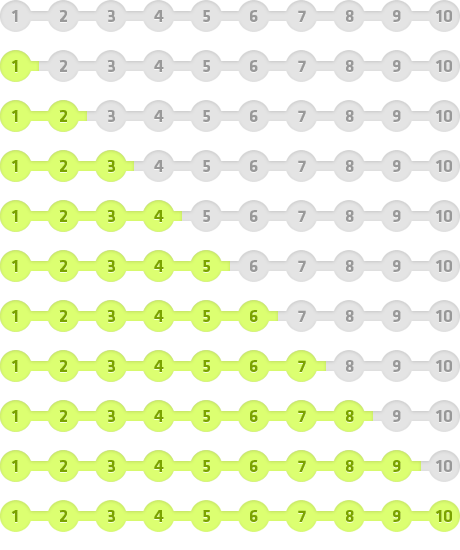
<style>
.page{position:relative;width:460px;height:550px;background:#ffffff}
.page>*{position:absolute;margin:0}
.t1{font:18px "KlavikaBold-Bold";color:#999999}
.t2{font:18px "KlavikaBold-Bold";color:#7aa200}
.t3{font:18px "KlavikaBold-Bold";color:#7ba300}
</style>
<div class="page">
<p class="t1" style="left:11px;top:10px;width:7px;height:12px">1</p>
<p class="t1" style="left:59px;top:10px;width:8px;height:12px">2</p>
<p class="t1" style="left:107px;top:10px;width:8px;height:12px">3</p>
<p class="t1" style="left:154px;top:10px;width:10px;height:12px">4</p>
<p class="t1" style="left:203px;top:10px;width:7px;height:12px">5</p>
<p class="t1" style="left:250px;top:10px;width:8px;height:12px">6</p>
<p class="t1" style="left:298px;top:10px;width:8px;height:12px">7</p>
<p class="t1" style="left:346px;top:10px;width:8px;height:12px">8</p>
<p class="t1" style="left:393px;top:10px;width:8px;height:12px">9</p>
<p class="t1" style="left:435px;top:10px;width:17px;height:12px">10</p>
<p class="t2" style="left:11px;top:60px;width:7px;height:12px">1</p>
<p class="t1" style="left:59px;top:60px;width:8px;height:12px">2</p>
<p class="t1" style="left:107px;top:60px;width:8px;height:12px">3</p>
<p class="t1" style="left:154px;top:60px;width:10px;height:12px">4</p>
<p class="t1" style="left:203px;top:60px;width:7px;height:12px">5</p>
<p class="t1" style="left:250px;top:60px;width:8px;height:12px">6</p>
<p class="t1" style="left:298px;top:60px;width:8px;height:12px">7</p>
<p class="t1" style="left:346px;top:60px;width:8px;height:12px">8</p>
<p class="t1" style="left:393px;top:60px;width:8px;height:12px">9</p>
<p class="t1" style="left:435px;top:60px;width:17px;height:12px">10</p>
<p class="t2" style="left:11px;top:110px;width:7px;height:12px">1</p>
<p class="t3" style="left:59px;top:110px;width:8px;height:12px">2</p>
<p class="t1" style="left:107px;top:110px;width:8px;height:12px">3</p>
<p class="t1" style="left:154px;top:110px;width:10px;height:12px">4</p>
<p class="t1" style="left:203px;top:110px;width:7px;height:12px">5</p>
<p class="t1" style="left:250px;top:110px;width:8px;height:12px">6</p>
<p class="t1" style="left:298px;top:110px;width:8px;height:12px">7</p>
<p class="t1" style="left:346px;top:110px;width:8px;height:12px">8</p>
<p class="t1" style="left:393px;top:110px;width:8px;height:12px">9</p>
<p class="t1" style="left:435px;top:110px;width:17px;height:12px">10</p>
<p class="t2" style="left:11px;top:160px;width:7px;height:12px">1</p>
<p class="t3" style="left:59px;top:160px;width:8px;height:12px">2</p>
<p class="t3" style="left:107px;top:160px;width:8px;height:12px">3</p>
<p class="t1" style="left:154px;top:160px;width:10px;height:12px">4</p>
<p class="t1" style="left:203px;top:160px;width:7px;height:12px">5</p>
<p class="t1" style="left:250px;top:160px;width:8px;height:12px">6</p>
<p class="t1" style="left:298px;top:160px;width:8px;height:12px">7</p>
<p class="t1" style="left:346px;top:160px;width:8px;height:12px">8</p>
<p class="t1" style="left:393px;top:160px;width:8px;height:12px">9</p>
<p class="t1" style="left:435px;top:160px;width:17px;height:12px">10</p>
<p class="t2" style="left:11px;top:210px;width:7px;height:12px">1</p>
<p class="t3" style="left:59px;top:210px;width:8px;height:12px">2</p>
<p class="t3" style="left:107px;top:210px;width:8px;height:12px">3</p>
<p class="t3" style="left:154px;top:210px;width:10px;height:12px">4</p>
<p class="t1" style="left:203px;top:210px;width:7px;height:12px">5</p>
<p class="t1" style="left:250px;top:210px;width:8px;height:12px">6</p>
<p class="t1" style="left:298px;top:210px;width:8px;height:12px">7</p>
<p class="t1" style="left:346px;top:210px;width:8px;height:12px">8</p>
<p class="t1" style="left:393px;top:210px;width:8px;height:12px">9</p>
<p class="t1" style="left:435px;top:210px;width:17px;height:12px">10</p>
<p class="t2" style="left:11px;top:260px;width:7px;height:12px">1</p>
<p class="t3" style="left:59px;top:260px;width:8px;height:12px">2</p>
<p class="t3" style="left:107px;top:260px;width:8px;height:12px">3</p>
<p class="t3" style="left:154px;top:260px;width:10px;height:12px">4</p>
<p class="t3" style="left:203px;top:260px;width:7px;height:12px">5</p>
<p class="t1" style="left:250px;top:260px;width:8px;height:12px">6</p>
<p class="t1" style="left:298px;top:260px;width:8px;height:12px">7</p>
<p class="t1" style="left:346px;top:260px;width:8px;height:12px">8</p>
<p class="t1" style="left:393px;top:260px;width:8px;height:12px">9</p>
<p class="t1" style="left:435px;top:260px;width:17px;height:12px">10</p>
<p class="t2" style="left:11px;top:310px;width:7px;height:12px">1</p>
<p class="t3" style="left:59px;top:310px;width:8px;height:12px">2</p>
<p class="t3" style="left:107px;top:310px;width:8px;height:12px">3</p>
<p class="t3" style="left:154px;top:310px;width:10px;height:12px">4</p>
<p class="t3" style="left:203px;top:310px;width:7px;height:12px">5</p>
<p class="t3" style="left:250px;top:310px;width:8px;height:12px">6</p>
<p class="t1" style="left:298px;top:310px;width:8px;height:12px">7</p>
<p class="t1" style="left:346px;top:310px;width:8px;height:12px">8</p>
<p class="t1" style="left:393px;top:310px;width:8px;height:12px">9</p>
<p class="t1" style="left:435px;top:310px;width:17px;height:12px">10</p>
<p class="t2" style="left:11px;top:360px;width:7px;height:12px">1</p>
<p class="t3" style="left:59px;top:360px;width:8px;height:12px">2</p>
<p class="t3" style="left:107px;top:360px;width:8px;height:12px">3</p>
<p class="t3" style="left:154px;top:360px;width:10px;height:12px">4</p>
<p class="t3" style="left:203px;top:360px;width:7px;height:12px">5</p>
<p class="t3" style="left:250px;top:360px;width:8px;height:12px">6</p>
<p class="t3" style="left:298px;top:360px;width:8px;height:12px">7</p>
<p class="t1" style="left:346px;top:360px;width:8px;height:12px">8</p>
<p class="t1" style="left:393px;top:360px;width:8px;height:12px">9</p>
<p class="t1" style="left:435px;top:360px;width:17px;height:12px">10</p>
<p class="t2" style="left:11px;top:410px;width:7px;height:12px">1</p>
<p class="t3" style="left:59px;top:410px;width:8px;height:12px">2</p>
<p class="t3" style="left:107px;top:410px;width:8px;height:12px">3</p>
<p class="t3" style="left:154px;top:410px;width:10px;height:12px">4</p>
<p class="t3" style="left:203px;top:410px;width:7px;height:12px">5</p>
<p class="t3" style="left:250px;top:410px;width:8px;height:12px">6</p>
<p class="t3" style="left:298px;top:410px;width:8px;height:12px">7</p>
<p class="t3" style="left:346px;top:410px;width:8px;height:12px">8</p>
<p class="t1" style="left:393px;top:410px;width:8px;height:12px">9</p>
<p class="t1" style="left:435px;top:410px;width:17px;height:12px">10</p>
<p class="t2" style="left:11px;top:460px;width:7px;height:12px">1</p>
<p class="t3" style="left:59px;top:460px;width:8px;height:12px">2</p>
<p class="t3" style="left:107px;top:460px;width:8px;height:12px">3</p>
<p class="t3" style="left:154px;top:460px;width:10px;height:12px">4</p>
<p class="t3" style="left:203px;top:460px;width:7px;height:12px">5</p>
<p class="t3" style="left:250px;top:460px;width:8px;height:12px">6</p>
<p class="t3" style="left:298px;top:460px;width:8px;height:12px">7</p>
<p class="t3" style="left:346px;top:460px;width:8px;height:12px">8</p>
<p class="t3" style="left:393px;top:460px;width:8px;height:12px">9</p>
<p class="t1" style="left:435px;top:460px;width:17px;height:12px">10</p>
<p class="t2" style="left:11px;top:510px;width:7px;height:12px">1</p>
<p class="t3" style="left:59px;top:510px;width:8px;height:12px">2</p>
<p class="t3" style="left:107px;top:510px;width:8px;height:12px">3</p>
<p class="t3" style="left:154px;top:510px;width:10px;height:12px">4</p>
<p class="t3" style="left:203px;top:510px;width:7px;height:12px">5</p>
<p class="t3" style="left:250px;top:510px;width:8px;height:12px">6</p>
<p class="t3" style="left:298px;top:510px;width:8px;height:12px">7</p>
<p class="t3" style="left:346px;top:510px;width:8px;height:12px">8</p>
<p class="t3" style="left:393px;top:510px;width:8px;height:12px">9</p>
<p class="t3" style="left:435px;top:510px;width:17px;height:12px">10</p>
</div>
